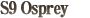
<style>
.page{position:relative;width:90px;height:18px;background:#ffffff}
.page>*{position:absolute;margin:0}
.t1{font:17px "RyuminPro-ExBold";letter-spacing:-0.06em;color:#4a3f32;font-weight:bold;scale:0.9 1}
</style>
<div class="page">
<p class="t1" style="left:0px;top:1px;width:69px;height:17px">S9 Osprey</p>
</div>
